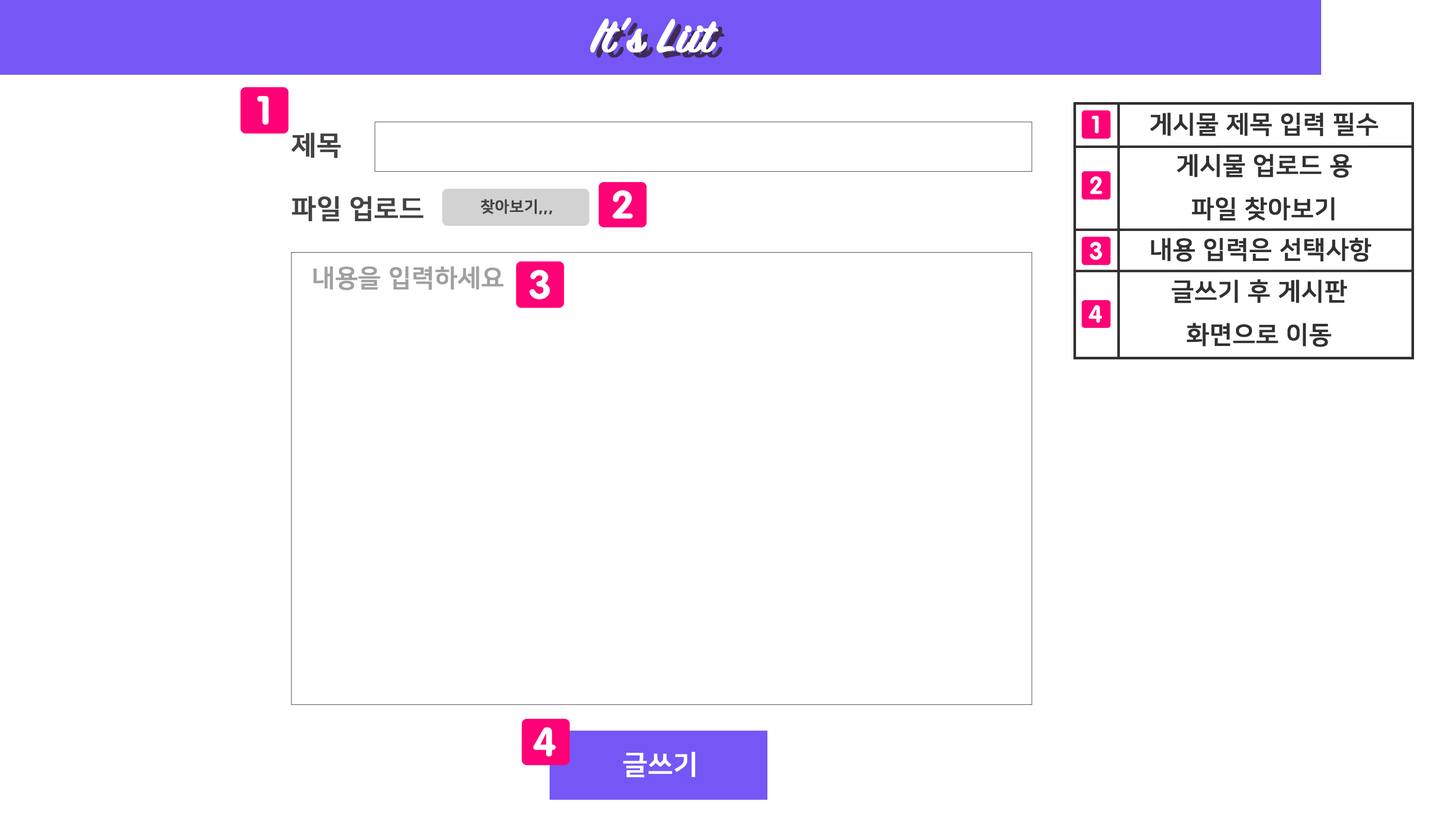
<style>
.page{position:relative;width:1445px;height:825px;background:#ffffff}
.page>*{position:absolute;margin:0}
.t1{font:51.6px "SignPainter-HouseScriptSemibold";color:#ffffff;font-weight:bold}
.t2{font:51.6px "SignPainter-HouseScriptSemibold";color:#3f2b56;font-weight:bold}
.t3{font:24.8px "NanumSquareB";color:#313131;font-weight:bold}
.t4{font:26.8px "NanumSquareB";color:#434343;font-weight:bold}
.t5{font:24.8px "NanumSquareB";color:#a0a0a0;font-weight:bold}
.t6{font:26.8px "NanumSquareB";color:#ffffff;font-weight:bold}
</style>
<div class="page">
<p class="t1" style="left:590px;top:18px;width:128px;height:35px">It’s Liit</p>
<p class="t2" style="left:596px;top:23px;width:128px;height:35px">It’s Liit</p>
<p class="t3" style="left:1150px;top:112px;width:228px;height:24px">게시물 제목 입력 필수</p>
<p class="t4" style="left:291px;top:133px;width:50px;height:25px">제목</p>
<p class="t3" style="left:1177px;top:154px;width:175px;height:67px;text-align:center">게시물 업로드 용<br>파일 찾아보기</p>
<p class="t4" style="left:291px;top:196px;width:133px;height:26px">파일 업로드</p>
<p class="t3" style="left:1150px;top:238px;width:221px;height:24px">내용 입력은 선택사항</p>
<p class="t5" style="left:313px;top:266px;width:191px;height:24px">내용을 입력하세요</p>
<p class="t3" style="left:1171px;top:279px;width:176px;height:68px;text-align:center">글쓰기 후 게시판<br>화면으로 이동</p>
<p class="t6" style="left:623px;top:752px;width:72px;height:26px">글쓰기</p>
</div>
